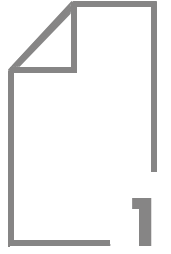
<style>
.page{position:relative;width:171px;height:254px;background:#ffffff}
.page>*{position:absolute;margin:0}
.t1{font:63.5px "Futura-Bold";color:#868585}
</style>
<div class="page">
<p class="t1" style="left:132px;top:198px;width:20px;height:48px">1</p>
</div>
